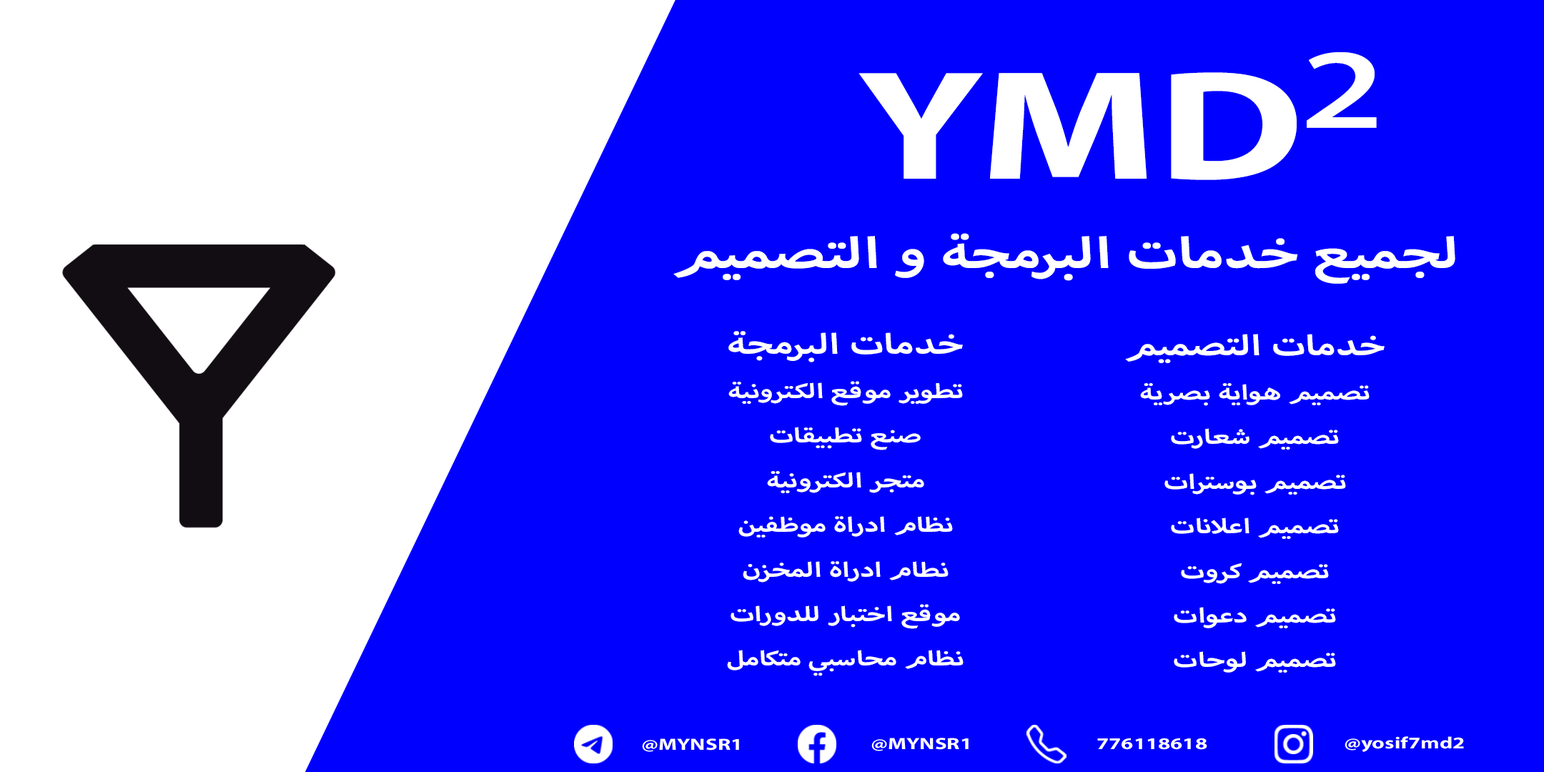
<style>
.page{position:relative;width:1544px;height:772px;background:#0000ff}
.page>*{position:absolute;margin:0}
.t1{font:219.2px "MyriadArabic-Bold";color:#ffffff;scale:1.35 1}
.t2{font:245.2px "MyriadPro-Regular";color:#000000}
.t3{font:60.8px "MyriadArabic-Bold";color:#ffffff;scale:1.35 1}
.t4{font:29px "MyriadArabic-Bold";color:#ffffff;scale:1.35 1}
.t5{font:40.2px "MyriadArabic-Bold";color:#ffffff;scale:1.35 1}
.t6{font:23.1px "MyriadArabic-Bold";color:#ffffff;scale:1.35 1}
</style>
<div class="page">
<p class="t1" style="left:859px;top:52px;width:518px;height:128px">YMD<span class="t2">2</span></p>
<p class="t3" style="left:673px;top:233px;width:783px;height:51px">لجميع خدمات البرمجة و التصميم</p>
<p class="t4" style="left:727px;top:331px;width:237px;height:345px;text-align:center"><span class="t5">خدمات البرمجة<br></span>تطوير موقع الكترونية<br>صنع تطبيقات <br>متجر الكترونية<br>نظام ادراة موظفين<br>نطام ادراة المخزن<br>موقع اختبار للدورات <br>نظام محاسبي متكامل</p>
<p class="t4" style="left:1125px;top:334px;width:260px;height:339px;text-align:center"><span class="t5">خدمات التصميم<br></span>تصميم هواية بصرية<br>تصميم شعارت<br>تصميم بوسترات<br>تصميم اعلانات<br>تصميم كروت <br>تصميم دعوات <br>تصميم لوحات</p>
<p class="t6" style="left:872px;top:738px;width:97px;height:13px">@MYNSR1</p>
<p class="t6" style="left:1097px;top:738px;width:111px;height:12px">776118618</p>
<p class="t6" style="left:1345px;top:736px;width:119px;height:16px">@yosif7md2</p>
<p class="t6" style="left:642px;top:739px;width:97px;height:13px">@MYNSR1</p>
</div>
